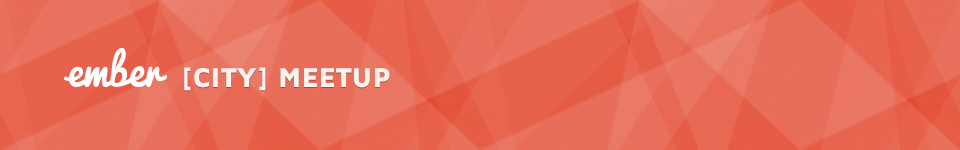
<style>
.page{position:relative;width:960px;height:150px}
.page>*{position:absolute;margin:0}
.t1{font:28px "MavenProBlack";color:#faf2ee}
</style>
<div class="page">
<p class="t1" style="left:184px;top:67px;width:206px;height:24px">[CITY] MEETUP</p>
</div>
